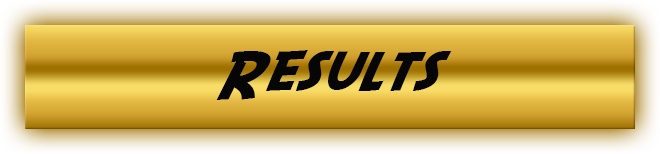
<style>
.page{position:relative;width:660px;height:154px}
.page>*{position:absolute;margin:0}
.t1{font:55.3px "SFFedora";letter-spacing:-0.005em;color:#060606;scale:1.05 1}
</style>
<div class="page">
<p class="t1" style="left:216px;top:50px;width:236px;height:50px">Results</p>
</div>
